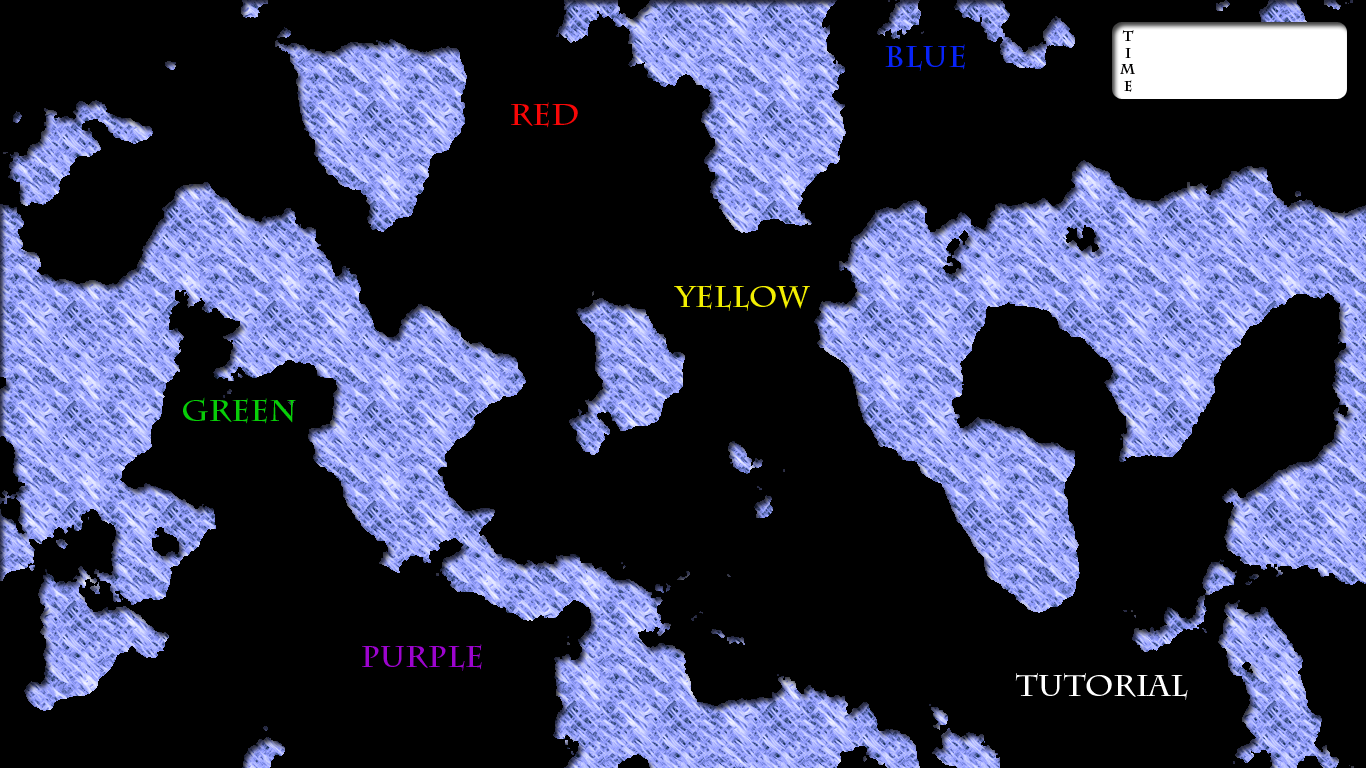
<style>
.page{position:relative;width:1366px;height:768px;background:#000000}
.page>*{position:absolute;margin:0}
.t1{font:14px "CharlemagneStd-Bold";color:#010000}
.t2{font:30px "CharlemagneStd-Bold";color:#0723f8}
.t3{font:30px "CharlemagneStd-Bold";color:#f80707}
.t4{font:30px "CharlemagneStd-Bold";color:#f2ef01}
.t5{font:30px "CharlemagneStd-Bold";color:#08ce08}
.t6{font:30px "CharlemagneStd-Bold";color:#9c04ce}
.t7{font:30px "CharlemagneStd-Bold";color:#ffffff}
</style>
<div class="page">
<p class="t1" style="left:1120px;top:30px;width:15px;height:62px;text-align:center">T<br>i<br>m<br>e</p>
<p class="t2" style="left:885px;top:44px;width:80px;height:27px">Blue</p>
<p class="t3" style="left:511px;top:102px;width:67px;height:26px">Red</p>
<p class="t4" style="left:674px;top:284px;width:136px;height:27px">Yellow</p>
<p class="t5" style="left:183px;top:397px;width:113px;height:27px">Green</p>
<p class="t6" style="left:362px;top:644px;width:120px;height:27px">Purple</p>
<p class="t7" style="left:1015px;top:673px;width:173px;height:27px">Tutorial</p>
</div>
